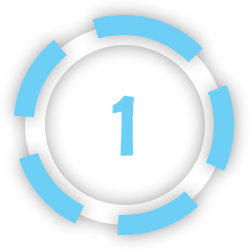
<style>
.page{position:relative;width:250px;height:250px;background:#ffffff}
.page>*{position:absolute;margin:0}
.t1{font:100px "BerlinSansFB-Reg";color:#6dcff6}
</style>
<div class="page">
<p class="t1" style="left:112px;top:95px;width:22px;height:61px">1</p>
</div>
